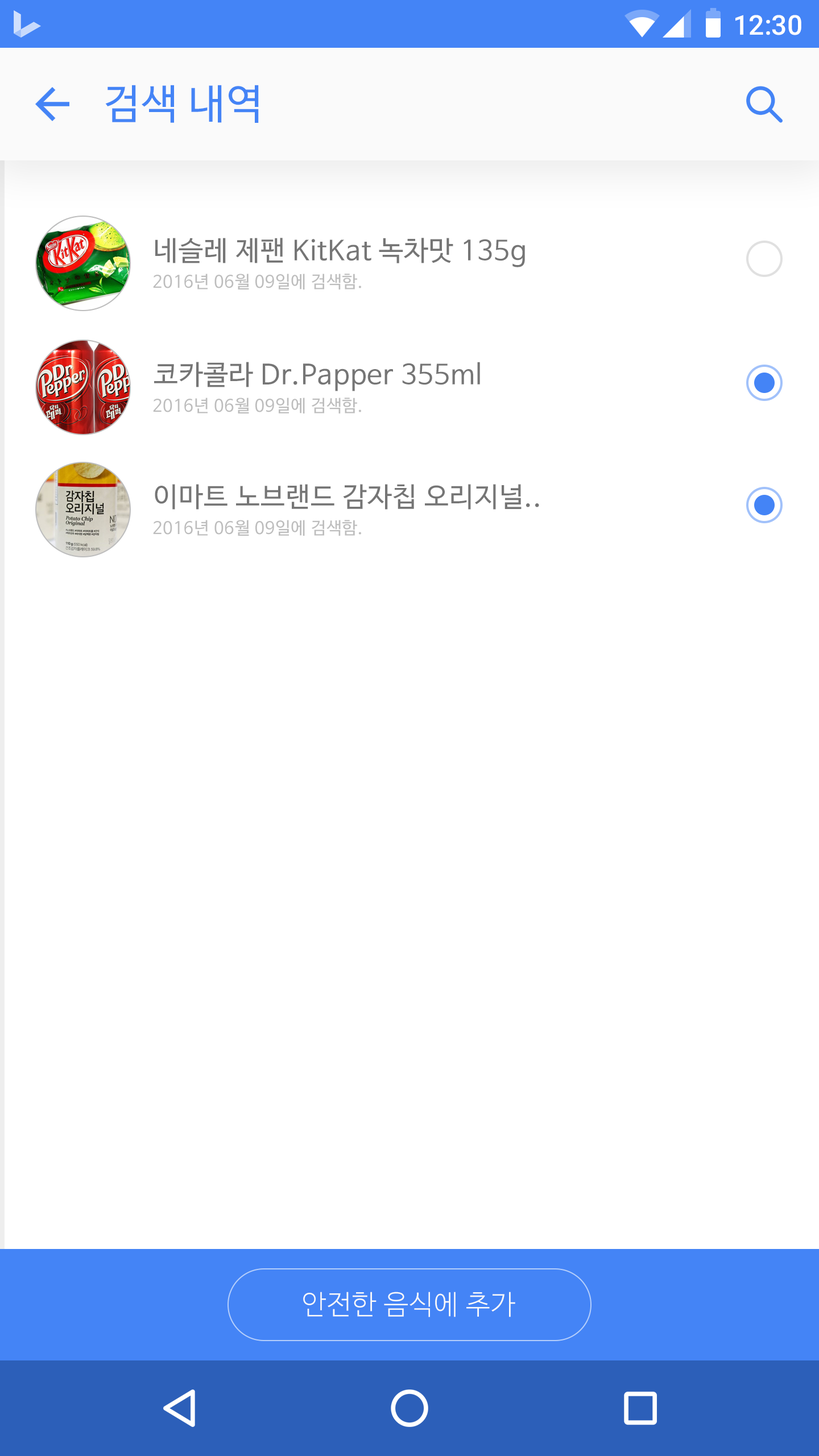
<style>
.page{position:relative;width:819px;height:1456px;background:#ffffff}
.page>*{position:absolute;margin:0}
.t1{font:27.3px "Roboto-Medium";color:#ffffff}
.t2{font:40.9px "NanumBarunGothic";letter-spacing:0.025em;color:#4484f6}
.t3{font:27.3px "NanumBarunGothic";letter-spacing:0.025em;color:#757575}
.t4{font:17.1px "NanumBarunGothic";letter-spacing:0.025em;color:#bdbdbd}
.t5{font:27.3px "NanumBarunGothicLight";letter-spacing:0.025em;color:#fafafa}
</style>
<div class="page">
<p class="t1" style="left:735px;top:15px;width:66px;height:20px">12:30</p>
<p class="t2" style="left:105px;top:85px;width:154px;height:38px">검색 내역</p>
<p class="t3" style="left:155px;top:238px;width:370px;height:29px">네슬레 제팬 KitKat 녹차맛 135g</p>
<p class="t4" style="left:153px;top:274px;width:208px;height:15px">2016년 06월 09일에 검색함.</p>
<p class="t3" style="left:154px;top:362px;width:326px;height:29px">코카콜라 Dr.Papper 355ml</p>
<p class="t4" style="left:153px;top:398px;width:208px;height:15px">2016년 06월 09일에 검색함.</p>
<p class="t3" style="left:155px;top:484px;width:384px;height:26px">이마트 노브랜드 감자칩 오리지널..</p>
<p class="t4" style="left:153px;top:520px;width:208px;height:16px">2016년 06월 09일에 검색함.</p>
<p class="t5" style="left:303px;top:1292px;width:212px;height:25px">안전한 음식에 추가</p>
</div>
